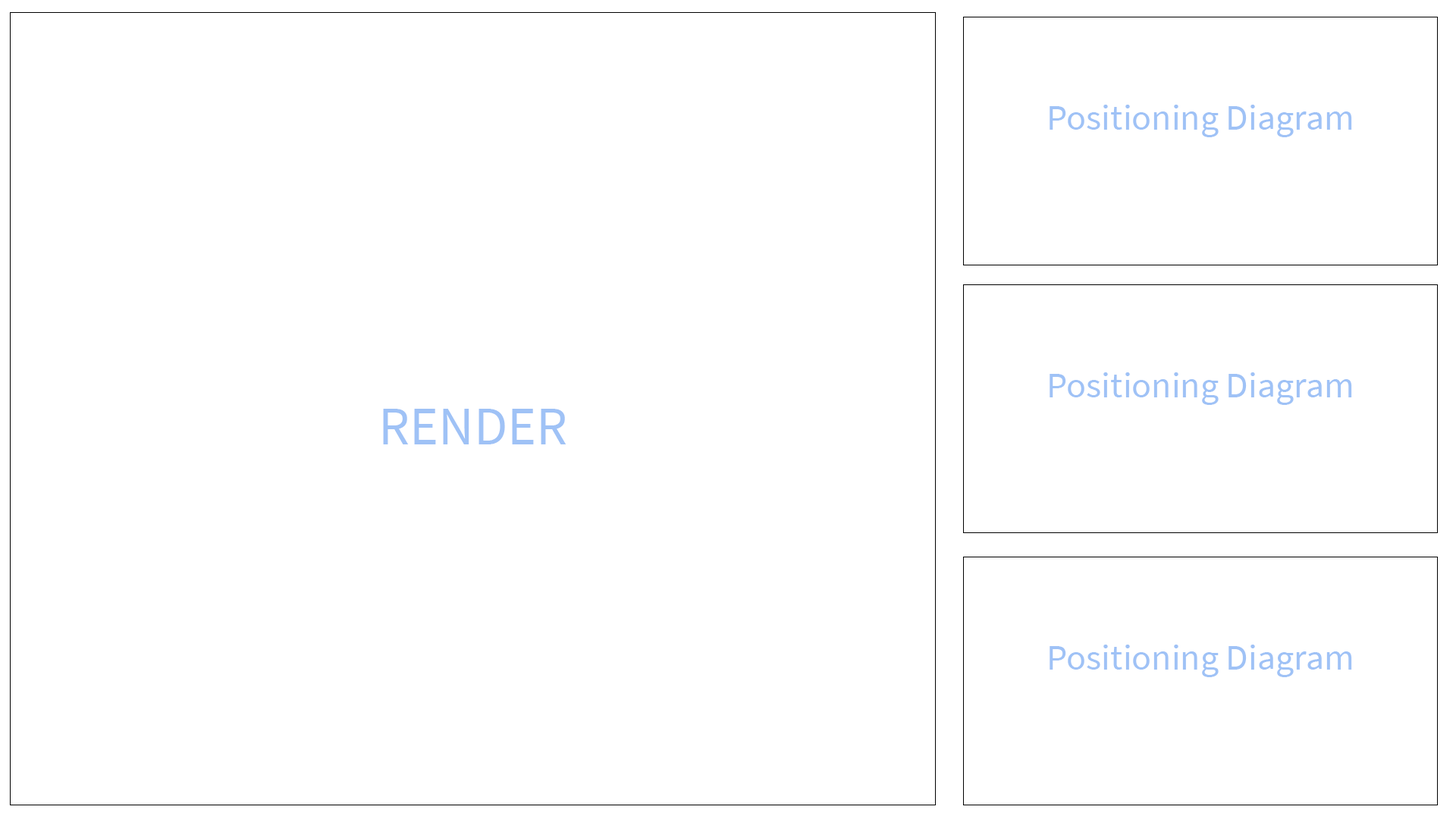
<style>
.page{position:relative;width:1456px;height:819px;background:#ffffff}
.page>*{position:absolute;margin:0}
.t1{font:36.4px "SourceSansPro-Regular";color:#9fc2f6}
.t2{font:54.6px "SourceSansPro-Regular";color:#9fc2f6}
</style>
<div class="page">
<p class="t1" style="left:1050px;top:105px;width:302px;height:32px">Positioning Diagram</p>
<p class="t1" style="left:1050px;top:372px;width:302px;height:33px">Positioning Diagram</p>
<p class="t2" style="left:383px;top:409px;width:183px;height:35px">RENDER</p>
<p class="t1" style="left:1050px;top:645px;width:302px;height:32px">Positioning Diagram</p>
</div>
